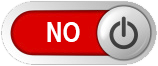
<style>
.page{position:relative;width:158px;height:66px}
.page>*{position:absolute;margin:0}
.t1{font:28px "ArialNarrow-Bold";color:#ffffff}
</style>
<div class="page">
<p class="t1" style="left:47px;top:22px;width:33px;height:20px">NO</p>
</div>
